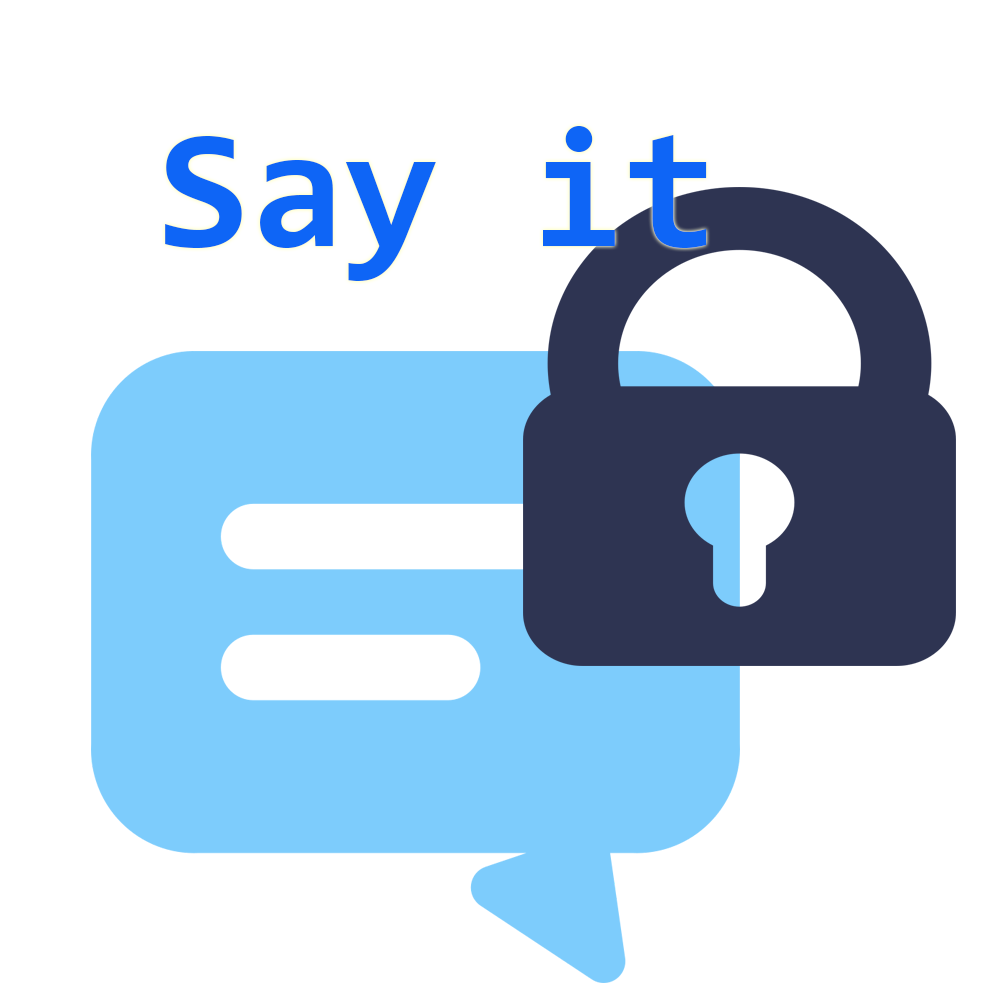
<style>
.page{position:relative;width:1000px;height:1000px;background:#ffffff}
.page>*{position:absolute;margin:0}
.t1{font:170px "Consolas-Bold";color:#0e65f6}
</style>
<div class="page">
<p class="t1" style="left:165px;top:126px;width:542px;height:155px">Say it</p>
</div>
